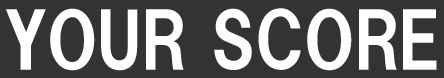
<style>
.page{position:relative;width:444px;height:78px;background:#333333}
.page>*{position:absolute;margin:0}
.t1{font:75px "HGPSoeiKakugothicUB";color:#ffffff}
</style>
<div class="page">
<p class="t1" style="left:6px;top:8px;width:431px;height:63px">YOUR SCORE</p>
</div>
